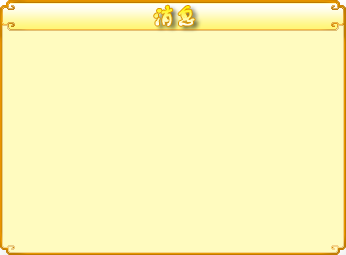
<style>
.page{position:relative;width:346px;height:255px;background:#fffbbf}
.page>*{position:absolute;margin:0}
.t1{font:25px "FZSTK--GBK1-0";letter-spacing:-0.14em;font-weight:bold}
</style>
<div class="page">
<p class="t1" style="left:154px;top:5px;width:41px;height:21px">消息</p>
</div>
